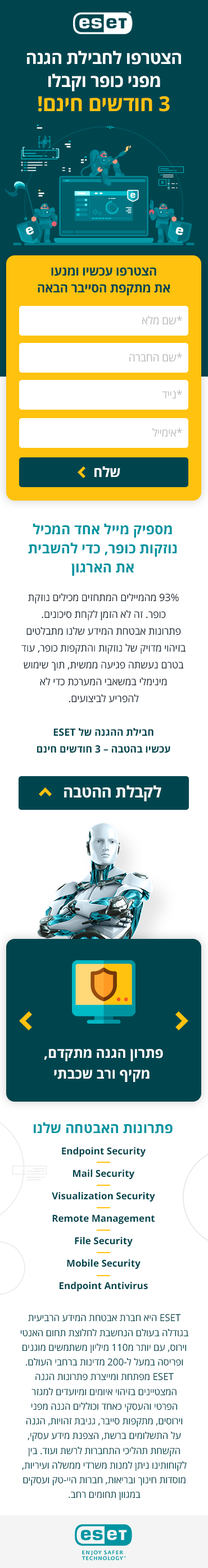
<style>
.page{position:relative;width:208px;height:1568px;background:#ffffff}
.page>*{position:absolute;margin:0}
.t1{font:17.2px/22.7px "OpenSansHebrew-Bold";letter-spacing:-0.02em;color:#ffffff}
.t2{font:20.7px "OpenSansHebrew-Bold";letter-spacing:-0.02em;color:#ffc20e}
.t3{font:20.7px "OpenSansHebrew-Bold";letter-spacing:0.04em;color:#ffc20e}
.t4{font:12.6px/16.6px "OpenSansHebrew-Bold";letter-spacing:-0.02em;color:#00454e}
.t5{font:11.2px "OpenSansHebrew-Regular";letter-spacing:-0.02em;color:#bebebe}
.t6{font:14.1px "OpenSansHebrew-Bold";letter-spacing:-0.02em;color:#ffffff}
.t7{font:14px/19.1px "OpenSansHebrew-Bold";color:#0094a1}
.t8{font:10.1px/16.8px "OpenSansHebrew-Regular";color:#17232f}
.t9{font:10.1px/16.8px "OpenSansHebrew-Bold";color:#00454e}
.t10{font:15.7px "OpenSansHebrew-Bold";letter-spacing:-0.02em;color:#ffffff}
.t11{font:13.7px/20.6px "OpenSansHebrew-Bold";color:#ffffff}
.t12{font:14px "OpenSansHebrew-Bold";color:#0094a1}
.t13{font:9.6px/22.4px "OpenSansHebrew-Bold";color:#00454e}
.t14{font:9.5px/14.7px "OpenSansHebrew-Regular";color:#00454e}
</style>
<div class="page">
<p class="t1" style="left:27px;top:51px;width:154px;height:40px;text-align:center">הצטרפו לחבילת הגנה <br>מפני כופר וקבלו</p>
<p class="t2" style="left:38px;top:96px;width:131px;height:16px"><span class="t3">3</span> חודשים חינם!</p>
<p class="t4" style="left:38px;top:267px;width:132px;height:29px;text-align:center">הצטרפו עכשיו ומנעו<br>את מתקפת הסייבר הבאה</p>
<p class="t5" style="left:141px;top:315px;width:41px;height:10px">*שם מלא</p>
<p class="t5" style="left:129px;top:352px;width:53px;height:10px">*שם החברה</p>
<p class="t5" style="left:162px;top:389px;width:20px;height:10px">*נייד</p>
<p class="t5" style="left:152px;top:428px;width:30px;height:9px">*אימייל</p>
<p class="t6" style="left:94px;top:466px;width:26px;height:11px">שלח</p>
<p class="t7" style="left:28px;top:524px;width:149px;height:52px;text-align:center">מספיק מייל אחד המכיל נוזקות כופר, כדי להשבית את הארגון</p>
<p class="t8" style="left:21px;top:593px;width:165px;height:160px;text-align:center">93% מהמיילים המתחזים מכילים נוזקת כופר. זה לא הזמן לקחת סיכונים.<br>פתרונות אבטחת המידע שלנו מתבלטים בזיהוי מדויק של נוזקות והתקפות כופר, עוד בטרם נעשתה פגיעה ממשית, תוך שימוש מינימלי במשאבי המערכת כדי לא<br>להפריע לביצועים.<br><br><span class="t9">חבילת ההגנה של ESET<br>עכשיו בהטבה – 3 חודשים חינם</span></p>
<p class="t10" style="left:64px;top:785px;width:97px;height:16px">לקבלת ההטבה</p>
<p class="t11" style="left:44px;top:1049px;width:119px;height:33px;text-align:center">פתרון הגנה מתקדם,<br> מקיף ורב שכבתי</p>
<p class="t12" style="left:34px;top:1122px;width:138px;height:12px">פתרונות האבטחה שלנו</p>
<p class="t13" style="left:52px;top:1147px;width:103px;height:144px;text-align:center">Endpoint Security<br>Mail Security<br>Visualization Security<br>Remote Management<br>File Security<br>Mobile Security<br>Endpoint Antivirus</p>
<p class="t14" style="left:20px;top:1314px;width:169px;height:187px;text-align:center">ESET היא חברת אבטחת המידע הרביעית בגודלה בעולם הנחשבת לחלוצת תחום האנטי וירוס, עם יותר מ110 מיליון משתמשים מוגנים ופריסה במעל ל-200 מדינות ברחבי העולם. ESET מפתחת ומייצרת פתרונות הגנה המצטיינים בזיהוי איומים ומיועדים למגזר הפרטי והעסקי כאחד וכוללים הגנה מפני וירוסים, מתקפות סייבר, גניבת זהויות, הגנה על התשלומים ברשת, הצפנת מידע עסקי, הקשחת תהליכי התחברות לרשת ועוד. בין לקוחותינו ניתן למנות משרדי ממשלה ועיריות, מוסדות חינוך ובריאות, חברות היי-טק ועסקים במגוון תחומים רחב.</p>
</div>
